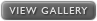
<style>
.page{position:relative;width:97px;height:21px}
.page>*{position:absolute;margin:0}
.t1{font:10px "GillSans";letter-spacing:0.1em;color:#dfdfdf}
</style>
<div class="page">
<p class="t1" style="left:9px;top:7px;width:79px;height:7px">VIEW GALLERY</p>
</div>
